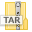
<style>
.page{position:relative;width:32px;height:32px;background:#ffffff}
.page>*{position:absolute;margin:0}
.t1{font:8px "MeiryoUI-Bold";color:#64625e}
</style>
<div class="page">
<p class="t1" style="left:3px;top:16px;width:18px;height:8px">TAR</p>
</div>
